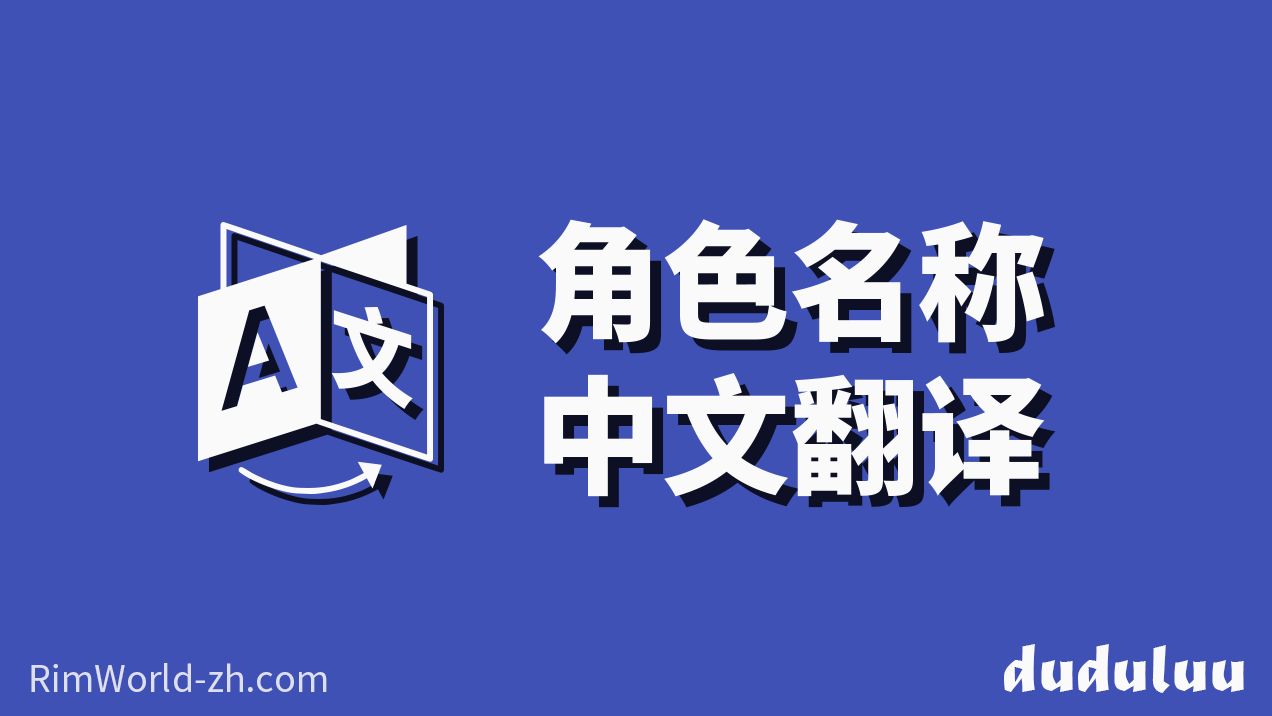
<style>
.page{position:relative;width:1272px;height:716px;background:#3f51b5}
.page>*{position:absolute;margin:0}
.t1{font:128px "NotoSansSC-Black";color:#fafafa}
.t2{font:72px "MaturaMTScriptCapitals";color:#fafafa}
.t3{font:36px "NotoSansSC-Regular";color:#dddfed}
</style>
<div class="page">
<p class="t1" style="left:538px;top:219px;width:507px;height:278px">角色名称<br>中文翻译</p>
<p class="t2" style="left:1004px;top:644px;width:240px;height:49px">duduluu</p>
<p class="t3" style="left:31px;top:663px;width:296px;height:29px">RimWorld-zh.com</p>
</div>
